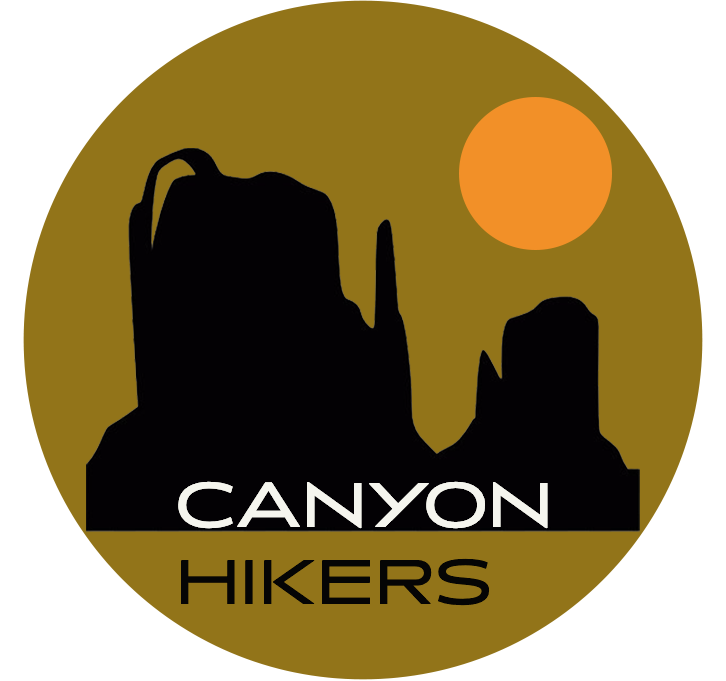
<style>
.page{position:relative;width:726px;height:681px;background:#927419}
.page>*{position:absolute;margin:0}
.t1{font:64.3px "AnisetteStd-Regular";letter-spacing:0.015em;color:#f5f5ee}
.t2{font:64.3px "AnisetteStd-Regular";letter-spacing:0.015em;color:#050505}
</style>
<div class="page">
<p class="t1" style="left:178px;top:481px;width:370px;height:125px">CANYON<br><span class="t2">HIKERS</span></p>
</div>
